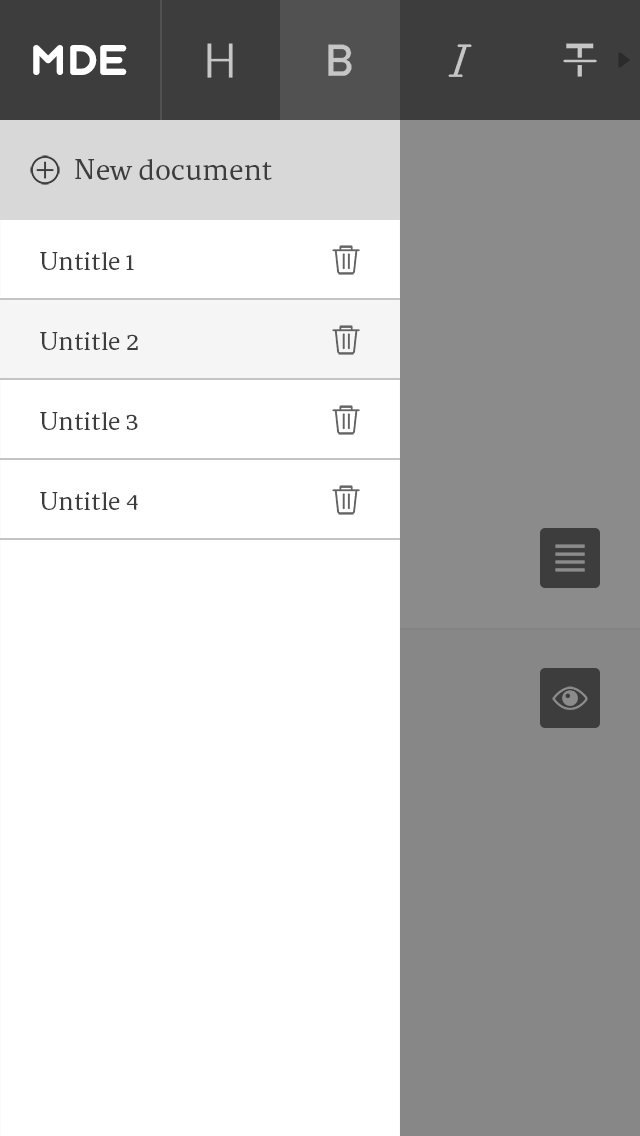
<style>
.page{position:relative;width:640px;height:1136px;background:#ffffff}
.page>*{position:absolute;margin:0}
.t1{font:40px "Aqum";color:#ffffff}
.t2{font:30px "Brela";color:#3d3d3d}
.t3{font:26px "Brela";color:#3d3d3d}
</style>
<div class="page">
<p class="t1" style="left:33px;top:45px;width:94px;height:30px">mde</p>
<p class="t2" style="left:75px;top:159px;width:197px;height:21px">New document</p>
<p class="t3" style="left:40px;top:252px;width:94px;height:18px">Untitle 1</p>
<p class="t3" style="left:40px;top:332px;width:98px;height:18px">Untitle 2</p>
<p class="t3" style="left:40px;top:412px;width:98px;height:18px">Untitle 3</p>
<p class="t3" style="left:40px;top:492px;width:98px;height:18px">Untitle 4</p>
</div>
